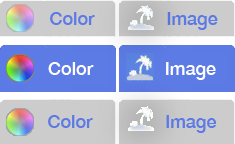
<style>
.page{position:relative;width:235px;height:144px;background:#cccccc}
.page>*{position:absolute;margin:0}
.t1{font:18px "HelveticaNeue-Medium";color:#5c7ae5}
.t2{font:18px "HelveticaNeue-Medium";color:#ffffff}
</style>
<div class="page">
<p class="t1" style="left:50px;top:12px;width:45px;height:13px">Color</p>
<p class="t1" style="left:167px;top:12px;width:51px;height:18px">Image</p>
<p class="t2" style="left:48px;top:62px;width:46px;height:13px">Color</p>
<p class="t2" style="left:166px;top:62px;width:50px;height:18px">Image</p>
<p class="t1" style="left:48px;top:115px;width:45px;height:13px">Color</p>
<p class="t1" style="left:166px;top:115px;width:51px;height:18px">Image</p>
</div>
